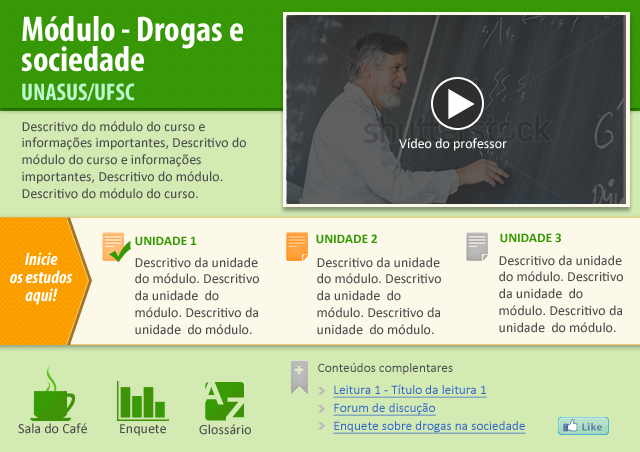
<style>
.page{position:relative;width:640px;height:452px;background:#d3ebb3}
.page>*{position:absolute;margin:0}
.t1{font:36px/30px "MyriadPro-BoldCond";color:#ffffff}
.t2{font:24px "MyriadPro-BoldCond";color:#bcf9d0}
.t3{font:14px "Calibri";color:#4d4d4d}
.t4{font:14px "Calibri";color:#ffffff}
.t5{font:13.3px "Calibri-Bold";color:#339900}
.t6{font:18px/18px "MyriadPro-BoldCondIt";color:#ffffff}
.t7{font:13.3px "Calibri";color:#4d4d4d}
.t8{font:13.3px/18px "Calibri";color:#3366cc;text-decoration:underline}
</style>
<div class="page">
<p class="t1" style="left:21px;top:16px;width:222px;height:85px">Módulo - Drogas e <br>sociedade<br><span class="t2">UNASUS/UFSC</span></p>
<p class="t3" style="left:22px;top:121px;width:224px;height:78px">Descritivo do módulo do curso e informações importantes, Descritivo do módulo do curso e informações importantes, Descritivo do módulo. Descritivo do módulo do curso.</p>
<p class="t4" style="left:399px;top:138px;width:108px;height:13px">Vídeo do professor</p>
<p class="t5" style="left:500px;top:233px;width:61px;height:10px">UNIDADE 3</p>
<p class="t5" style="left:135px;top:236px;width:62px;height:10px">UNIDADE 1</p>
<p class="t5" style="left:316px;top:234px;width:61px;height:10px">UNIDADE 2</p>
<p class="t6" style="left:10px;top:252px;width:63px;height:53px;text-align:center">Inicie<br>os estudos<br>aqui!</p>
<p class="t3" style="left:135px;top:257px;width:124px;height:78px">Descritivo da unidade  do módulo. Descritivo da unidade  do módulo. Descritivo da unidade  do módulo.</p>
<p class="t3" style="left:317px;top:257px;width:124px;height:78px">Descritivo da unidade  do módulo. Descritivo da unidade  do módulo. Descritivo da unidade  do módulo.</p>
<p class="t3" style="left:499px;top:255px;width:124px;height:78px">Descritivo da unidade  do módulo. Descritivo da unidade  do módulo. Descritivo da unidade  do módulo.</p>
<p class="t7" style="left:318px;top:362px;width:135px;height:13px">Conteúdos complentares</p>
<p class="t8" style="left:333px;top:384px;width:193px;height:50px">Leitura 1 - Título da leitura 1<br>Forum de discução<br>Enquete sobre drogas na sociedade</p>
<p class="t3" style="left:18px;top:423px;width:69px;height:11px">Sala do Café</p>
<p class="t3" style="left:120px;top:424px;width:46px;height:12px">Enquete</p>
<p class="t3" style="left:199px;top:424px;width:52px;height:11px">Glossário</p>
</div>
